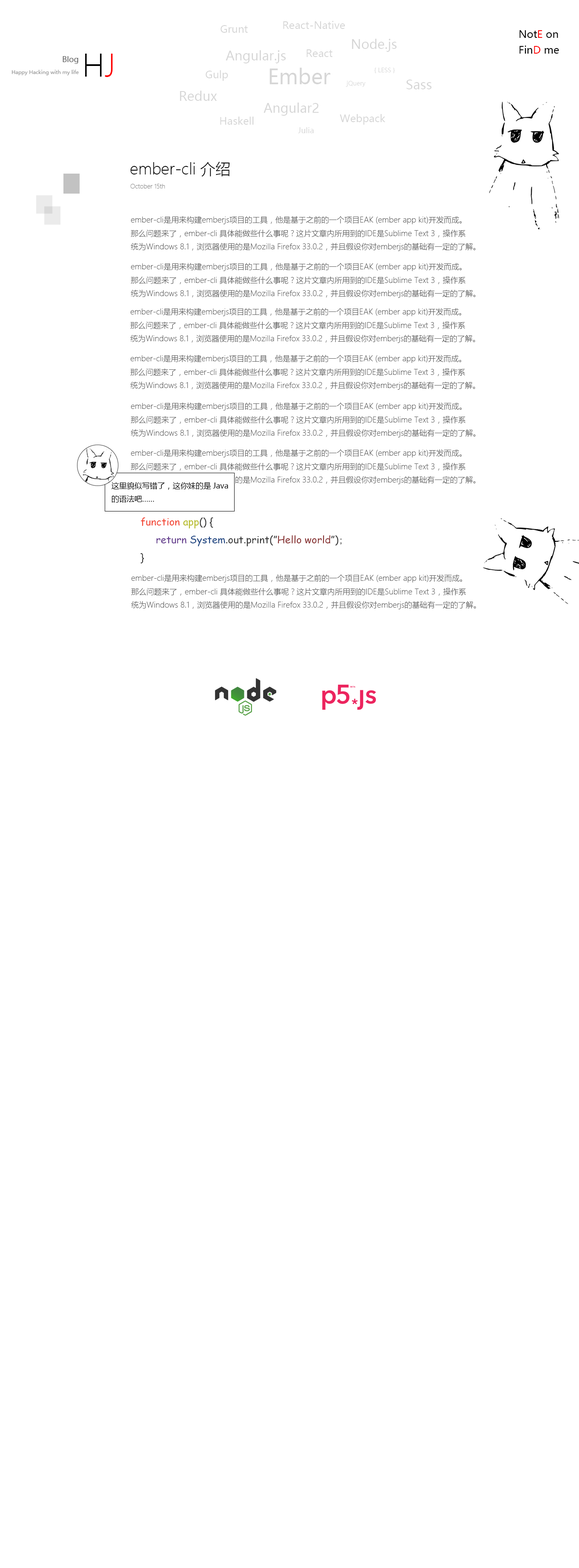
<style>
.page{position:relative;width:579px;height:1568px;background:#ffffff}
.page>*{position:absolute;margin:0}
.t1{font:10.2px "MicrosoftYaHei";color:#d6d6d6}
.t2{font:12.8px "MicrosoftYaHei";color:#d6d6d6}
.t3{font:10.2px "MicrosoftYaHei";color:#000000}
.t4{font:10.2px "MicrosoftYaHei";color:#ff0101}
.t5{font:30.6px "MicrosoftYaHeiLight";color:#000000}
.t6{font:30.6px "MicrosoftYaHeiLight";color:#ff0000}
.t7{font:10.2px "MicrosoftYaHei";color:#ff0000}
.t8{font:7.7px "MicrosoftYaHei";color:#585858}
.t9{font:5.1px "MicrosoftYaHei";color:#969696}
.t10{font:20.4px "MicrosoftYaHei";color:#d6d6d6}
.t11{font:6px "MicrosoftYaHei";color:#d6d6d6}
.t12{font:7.7px "MicrosoftYaHei";color:#d6d6d6}
.t13{font:15.3px "MicrosoftYaHeiLight";color:#000000}
.t14{font:6px "MicrosoftYaHeiLight";color:#838383}
.t15{font:7.7px "MicrosoftYaHeiLight";color:#585858}
.t16{font:7.7px "MicrosoftYaHei";color:#000000}
.t17{font:10.2px "ComicSansMS";color:#353535}
.t18{font:10.2px "ComicSansMS";color:#f24331}
.t19{font:10.2px "ComicSansMS";color:#b7bc29}
.t20{font:10.2px "ComicSansMS";color:#633b8d}
.t21{font:10.2px "ComicSansMS";color:#1d4582}
.t22{font:10.2px "ComicSansMS";color:#893333}
.t23{font:10.2px "SimSun";color:#353535}
</style>
<div class="page">
<p class="t1" style="left:220px;top:25px;width:28px;height:8px">Grunt</p>
<p class="t1" style="left:283px;top:21px;width:62px;height:8px">React-Native</p>
<p class="t2" style="left:351px;top:39px;width:46px;height:13px">Node.js</p>
<p class="t3" style="left:519px;top:30px;width:39px;height:8px">Not<span class="t4">E</span> on</p>
<p class="t5" style="left:85px;top:54px;width:28px;height:23px">H<span class="t6">J</span></p>
<p class="t2" style="left:226px;top:50px;width:60px;height:13px">Angular.js</p>
<p class="t1" style="left:306px;top:49px;width:26px;height:8px">React</p>
<p class="t3" style="left:519px;top:46px;width:40px;height:8px">Fin<span class="t7">D</span> me</p>
<p class="t8" style="left:63px;top:56px;width:15px;height:8px">Blog</p>
<p class="t9" style="left:12px;top:70px;width:67px;height:5px">Happy Hacking with my life</p>
<p class="t1" style="left:206px;top:70px;width:22px;height:11px">Gulp</p>
<p class="t10" style="left:269px;top:68px;width:61px;height:16px">Ember</p>
<p class="t11" style="left:374px;top:68px;width:21px;height:5px">{ LESS }</p>
<p class="t11" style="left:346px;top:81px;width:20px;height:6px">jQuery</p>
<p class="t2" style="left:406px;top:80px;width:25px;height:9px">Sass</p>
<p class="t2" style="left:180px;top:91px;width:37px;height:10px">Redux</p>
<p class="t2" style="left:263px;top:103px;width:56px;height:13px">Angular2</p>
<p class="t1" style="left:220px;top:117px;width:34px;height:8px">Haskell</p>
<p class="t1" style="left:340px;top:114px;width:45px;height:11px">Webpack</p>
<p class="t12" style="left:298px;top:127px;width:16px;height:6px">Julia</p>
<p class="t13" style="left:130px;top:162px;width:100px;height:15px">ember-cli 介绍</p>
<p class="t14" style="left:130px;top:184px;width:35px;height:5px">October 15th</p>
<p class="t15" style="left:131px;top:216px;width:344px;height:35px">ember-cli是用来构建emberjs项目的工具，他是基于之前的一个项目EAK (ember app kit)开发而成。<br>那么问题来了，ember-cli 具体能做些什么事呢？这片文章内所用到的IDE是Sublime Text 3，操作系<br>统为Windows 8.1，浏览器使用的是Mozilla Firefox 33.0.2，并且假设你对emberjs的基础有一定的了解。</p>
<p class="t15" style="left:131px;top:263px;width:344px;height:35px">ember-cli是用来构建emberjs项目的工具，他是基于之前的一个项目EAK (ember app kit)开发而成。<br>那么问题来了，ember-cli 具体能做些什么事呢？这片文章内所用到的IDE是Sublime Text 3，操作系<br>统为Windows 8.1，浏览器使用的是Mozilla Firefox 33.0.2，并且假设你对emberjs的基础有一定的了解。</p>
<p class="t15" style="left:130px;top:308px;width:345px;height:35px">ember-cli是用来构建emberjs项目的工具，他是基于之前的一个项目EAK (ember app kit)开发而成。<br>那么问题来了，ember-cli 具体能做些什么事呢？这片文章内所用到的IDE是Sublime Text 3，操作系<br>统为Windows 8.1，浏览器使用的是Mozilla Firefox 33.0.2，并且假设你对emberjs的基础有一定的了解。</p>
<p class="t15" style="left:130px;top:355px;width:345px;height:35px">ember-cli是用来构建emberjs项目的工具，他是基于之前的一个项目EAK (ember app kit)开发而成。<br>那么问题来了，ember-cli 具体能做些什么事呢？这片文章内所用到的IDE是Sublime Text 3，操作系<br>统为Windows 8.1，浏览器使用的是Mozilla Firefox 33.0.2，并且假设你对emberjs的基础有一定的了解。</p>
<p class="t15" style="left:131px;top:403px;width:344px;height:34px">ember-cli是用来构建emberjs项目的工具，他是基于之前的一个项目EAK (ember app kit)开发而成。<br>那么问题来了，ember-cli 具体能做些什么事呢？这片文章内所用到的IDE是Sublime Text 3，操作系<br>统为Windows 8.1，浏览器使用的是Mozilla Firefox 33.0.2，并且假设你对emberjs的基础有一定的了解。</p>
<p class="t15" style="left:131px;top:449px;width:344px;height:35px">ember-cli是用来构建emberjs项目的工具，他是基于之前的一个项目EAK (ember app kit)开发而成。<br>那么问题来了，ember-cli 具体能做些什么事呢？这片文章内所用到的IDE是Sublime Text 3，操作系<br>统为Windows 8.1，浏览器使用的是Mozilla Firefox 33.0.2，并且假设你对emberjs的基础有一定的了解。</p>
<p class="t16" style="left:111px;top:482px;width:117px;height:21px">这里貌似写错了，这你妹的是Java<br>的语法吧……</p>
<p class="t17" style="left:140px;top:517px;width:202px;height:46px"><span class="t18">function </span><span class="t19">app</span>() {<br> <span class="t20">return </span><span class="t21">System</span>.out.print(”<span class="t22">Hello world</span>”)<span class="t23">;<br></span>}</p>
<p class="t15" style="left:131px;top:574px;width:345px;height:35px">ember-cli是用来构建emberjs项目的工具，他是基于之前的一个项目EAK (ember app kit)开发而成。<br>那么问题来了，ember-cli 具体能做些什么事呢？这片文章内所用到的IDE是Sublime Text 3，操作系<br>统为Windows 8.1，浏览器使用的是Mozilla Firefox 33.0.2，并且假设你对emberjs的基础有一定的了解。</p>
</div>
